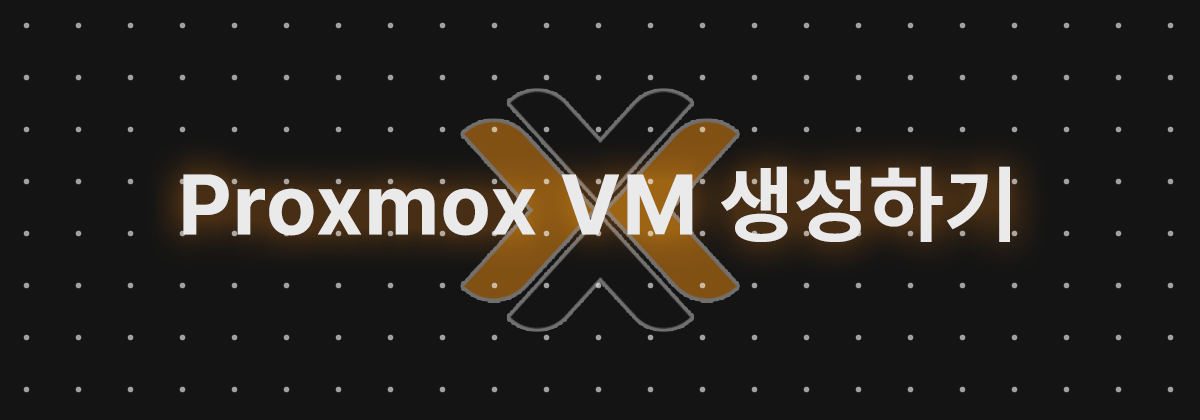
<style>
.page{position:relative;width:1200px;height:420px;background:#141414}
.page>*{position:absolute;margin:0}
.t1{font:84.6px "Pretendard-Bold";letter-spacing:0.02em;color:#eaeaea}
</style>
<div class="page">
<p class="t1" style="left:183px;top:166px;width:827px;height:76px">Proxmox VM 생성하기</p>
</div>
